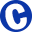
<style>
.page{position:relative;width:32px;height:32px;background:#ffffff}
.page>*{position:absolute;margin:0}
.t1{font:36.4px "FranklinGothic-DemiCnd";color:#ffffff;font-weight:bold;scale:1.08 1}
</style>
<div class="page">
<p class="t1" style="left:5px;top:3px;width:22px;height:27px;rotate:-16deg">C</p>
</div>
